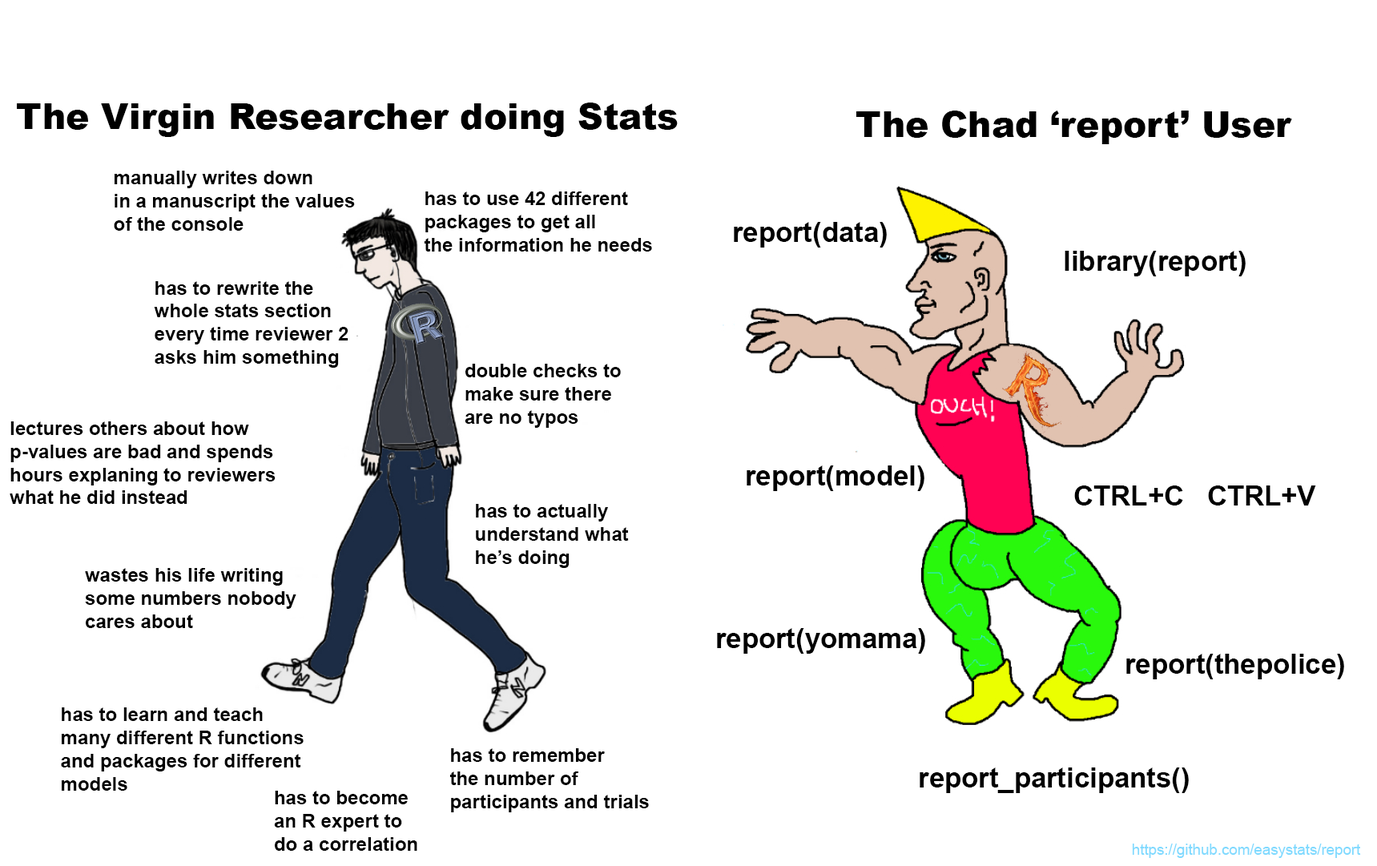
<style>
.page{position:relative;width:1377px;height:866px;background:#ffffff}
.page>*{position:absolute;margin:0}
.t1{font:35.2px "Arial-Black";color:#000000}
.t2{font:19.2px "Arial-BoldMT";color:#000000}
.t3{font:27.8px "Arial-BoldMT";color:#000000}
.t4{font:15px "ArialMT";color:#80daff}
</style>
<div class="page">
<p class="t1" style="left:17px;top:103px;width:661px;height:34px">The Virgin Researcher doing Stats</p>
<p class="t1" style="left:856px;top:111px;width:436px;height:33px">The Chad ‘report’ User</p>
<p class="t2" style="left:114px;top:171px;width:241px;height:60px">manually writes down<br>in a manuscript the values <br>of the console</p>
<p class="t2" style="left:424px;top:191px;width:228px;height:61px">has to use 42 different<br>packages to get all <br>the information he needs</p>
<p class="t3" style="left:734px;top:222px;width:153px;height:26px">report(data)</p>
<p class="t3" style="left:1065px;top:251px;width:181px;height:25px">library(report)</p>
<p class="t2" style="left:154px;top:281px;width:194px;height:87px">has to rewrite the<br>whole stats section<br>every time reviewer 2<br>asks him something</p>
<p class="t2" style="left:465px;top:364px;width:156px;height:64px">double checks to <br>make sure there <br>are no typos</p>
<p class="t2" style="left:10px;top:421px;width:266px;height:83px">lectures others about how<br>p-values are bad and spends<br>hours explaning to reviewers<br>what he did instead</p>
<p class="t3" style="left:747px;top:465px;width:177px;height:26px">report(model)</p>
<p class="t3" style="left:1074px;top:485px;width:242px;height:20px">CTRL+C   CTRL+V</p>
<p class="t2" style="left:476px;top:504px;width:153px;height:64px">has to actually<br>understand what<br>he’s doing</p>
<p class="t2" style="left:85px;top:568px;width:211px;height:60px">wastes his life writing<br>some numbers nobody<br>cares about</p>
<p class="t3" style="left:717px;top:628px;width:208px;height:26px">report(yomama)</p>
<p class="t3" style="left:1126px;top:654px;width:218px;height:25px">report(thepolice)</p>
<p class="t2" style="left:61px;top:707px;width:243px;height:84px">has to learn and teach<br>many different R functions<br>and packages for different <br>models</p>
<p class="t2" style="left:449px;top:748px;width:200px;height:64px">has to remember<br>the number of <br>participants and trials</p>
<p class="t3" style="left:920px;top:767px;width:269px;height:26px">report_participants()</p>
<p class="t2" style="left:274px;top:791px;width:143px;height:60px">has to become <br>an R expert to <br>do a correlation</p>
<p class="t4" style="left:1132px;top:844px;width:229px;height:14px">https://github.com/easystats/report</p>
</div>
